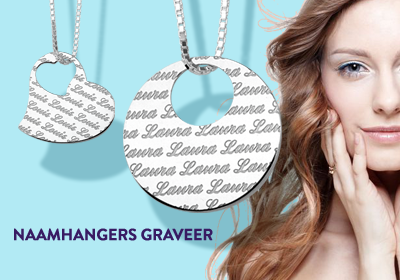
<style>
.page{position:relative;width:400px;height:280px;background:#b2eaf4}
.page>*{position:absolute;margin:0}
.t1{font:16px "BrandonGrotesque-Bold";letter-spacing:-0.02em;color:#381b63;font-weight:bold}
</style>
<div class="page">
<p class="t1" style="left:14px;top:228px;width:199px;height:13px">NAAMHANGERS GRAVEER</p>
</div>
